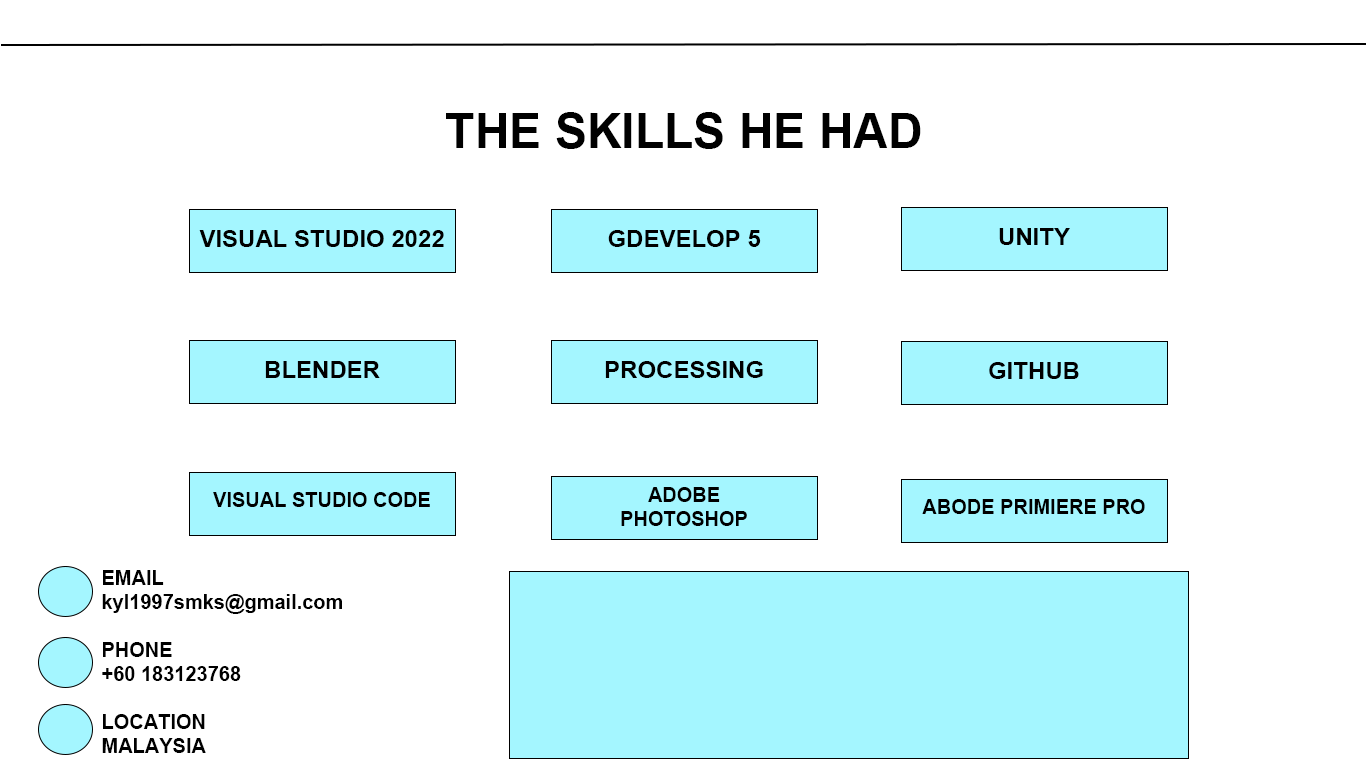
<style>
.page{position:relative;width:1366px;height:768px;background:#ffffff}
.page>*{position:absolute;margin:0}
.t1{font:48px "Arial-BoldMT";color:#000000}
.t2{font:24px "Arial-BoldMT";color:#000000}
.t3{font:20px "Arial-BoldMT";color:#000000}
</style>
<div class="page">
<p class="t1" style="left:446px;top:112px;width:475px;height:37px">THE SKILLS HE HAD</p>
<p class="t2" style="left:199px;top:230px;width:245px;height:17px">VISUAL STUDIO 2022</p>
<p class="t2" style="left:608px;top:230px;width:153px;height:17px">GDEVELOP 5</p>
<p class="t2" style="left:999px;top:228px;width:71px;height:17px">UNITY</p>
<p class="t2" style="left:265px;top:361px;width:115px;height:17px">BLENDER</p>
<p class="t2" style="left:605px;top:361px;width:158px;height:17px">PROCESSING</p>
<p class="t2" style="left:989px;top:362px;width:90px;height:17px">GITHUB</p>
<p class="t3" style="left:213px;top:492px;width:217px;height:15px">VISUAL STUDIO CODE</p>
<p class="t3" style="left:621px;top:487px;width:126px;height:39px;text-align:center">ADOBE<br>PHOTOSHOP</p>
<p class="t3" style="left:922px;top:499px;width:223px;height:15px">ABODE PRIMIERE PRO</p>
<p class="t3" style="left:102px;top:570px;width:240px;height:183px">EMAIL<br>kyl1997smks@gmail.com<br><br>PHONE<br>+60 183123768<br><br>LOCATION<br>MALAYSIA</p>
</div>
